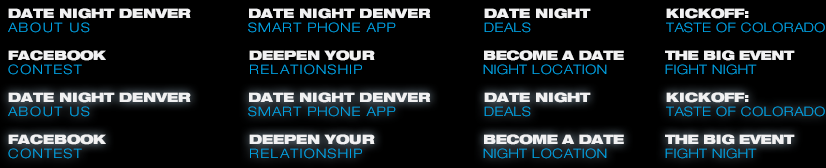
<style>
.page{position:relative;width:826px;height:168px;background:#000000}
.page>*{position:absolute;margin:0}
.t1{font:13px/13.9px "HelveticaNeue-BlackExt";color:#f1f1f2}
.t2{font:13px/13.9px "HelveticaNeue-LightExt";letter-spacing:0.12em;color:#00a4e4}
.t3{font:13px/13.9px "HelveticaNeueLTPro-BlkEx";color:#f1f1f2}
.t4{font:13px/13.9px "HelveticaNeueLTPro-BlkEx";letter-spacing:0.04em;color:#f1f1f2}
.t5{font:13px/13.9px "HelveticaNeue-LightExt";letter-spacing:0.08em;color:#00a4e4}
.t6{font:13px/13.9px "HelveticaNeue-LightExt";letter-spacing:0.04em;color:#00a4e4}
.t7{font:13px/13.9px "HelveticaNeue-LightExt";letter-spacing:0.1em;color:#00a4e4}
.t8{font:13px/13.9px "HelveticaNeue-BlackExt";letter-spacing:-0.02em;color:#f1f1f2}
</style>
<div class="page">
<p class="t1" style="left:8px;top:8px;width:183px;height:25px">DATE NIGHT DENVER<br><span class="t2">ABOUT US</span></p>
<p class="t3" style="left:248px;top:8px;width:183px;height:25px">DATE NIGHT DENVER<span class="t4"> <br></span><span class="t5">SMART PHONE APP</span></p>
<p class="t1" style="left:484px;top:8px;width:107px;height:25px">DATE NIGHT<br><span class="t6">DEALS</span></p>
<p class="t6" style="left:666px;top:8px;width:159px;height:25px"><span class="t1">KICKOFF:<br></span>TASTE OF COLORADO</p>
<p class="t1" style="left:8px;top:50px;width:98px;height:25px">FACEBOOK<br><span class="t7">CONTEST</span></p>
<p class="t7" style="left:249px;top:50px;width:126px;height:25px"><span class="t1">DEEPEN YOUR<br></span>RELATIONSHIP</p>
<p class="t6" style="left:483px;top:50px;width:141px;height:25px"><span class="t8">BECOME A DATE<br></span>NIGHT LOCATION</p>
<p class="t8" style="left:665px;top:50px;width:130px;height:25px">THE BIG EVENT<br><span class="t6">FIGHT NIGHT</span></p>
<p class="t1" style="left:8px;top:92px;width:183px;height:25px">DATE NIGHT DENVER<br><span class="t2">ABOUT US</span></p>
<p class="t3" style="left:248px;top:92px;width:183px;height:25px">DATE NIGHT DENVER<span class="t4"> <br></span><span class="t5">SMART PHONE APP</span></p>
<p class="t1" style="left:484px;top:92px;width:107px;height:25px">DATE NIGHT<br><span class="t6">DEALS</span></p>
<p class="t6" style="left:666px;top:92px;width:159px;height:25px"><span class="t1">KICKOFF:<br></span>TASTE OF COLORADO</p>
<p class="t1" style="left:8px;top:134px;width:98px;height:25px">FACEBOOK<br><span class="t7">CONTEST</span></p>
<p class="t7" style="left:249px;top:134px;width:126px;height:25px"><span class="t1">DEEPEN YOUR<br></span>RELATIONSHIP</p>
<p class="t6" style="left:483px;top:134px;width:141px;height:25px"><span class="t8">BECOME A DATE<br></span>NIGHT LOCATION</p>
<p class="t8" style="left:665px;top:134px;width:130px;height:25px">THE BIG EVENT<br><span class="t6">FIGHT NIGHT</span></p>
</div>
